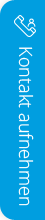
<style>
.page{position:relative;width:45px;height:220px;background:#009ee0}
.page>*{position:absolute;margin:0}
.t1{font:18px "OpenSans-Light";color:#ffffff}
</style>
<div class="page">
<p class="t1" style="left:18px;top:47px;width:16px;height:159px;rotate:90deg">Kontakt aufnehmen</p>
</div>
